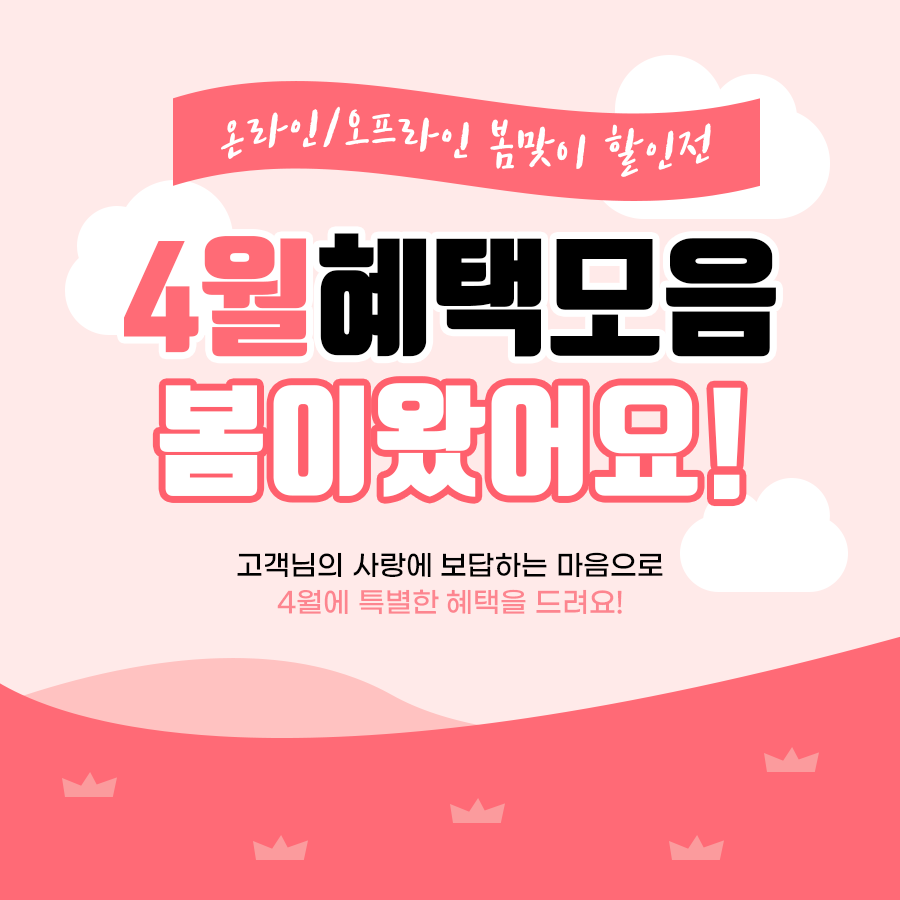
<style>
.page{position:relative;width:900px;height:900px;background:#ffeae9}
.page>*{position:absolute;margin:0}
.t1{font:60px "tvNEnjoystoriesB";color:#ffffff}
.t2{font:128px "TmonMonsoriBlack";color:#000000}
.t3{font:128px "TmonMonsoriBlack";color:#ff6b76}
.t4{font:120px "TmonMonsoriBlack";color:#ffffff}
.t5{font:28px "GmarketSansMedium";color:#000000}
.t6{font:28px "GmarketSansMedium";color:#fd868f}
</style>
<div class="page">
<p class="t1" style="left:221px;top:106px;width:490px;height:71px">온라인/오프라인 봄맞이 할인전</p>
<p class="t2" style="left:124px;top:233px;width:652px;height:124px"><span class="t3">4월</span>혜택모음</p>
<p class="t4" style="left:159px;top:383px;width:582px;height:117px">봄이왔어요!</p>
<p class="t5" style="left:237px;top:552px;width:426px;height:25px">고객님의 사랑에 보답하는 마음으로</p>
<p class="t6" style="left:277px;top:589px;width:345px;height:26px">4월에 특별한 혜택을 드려요!</p>
</div>
